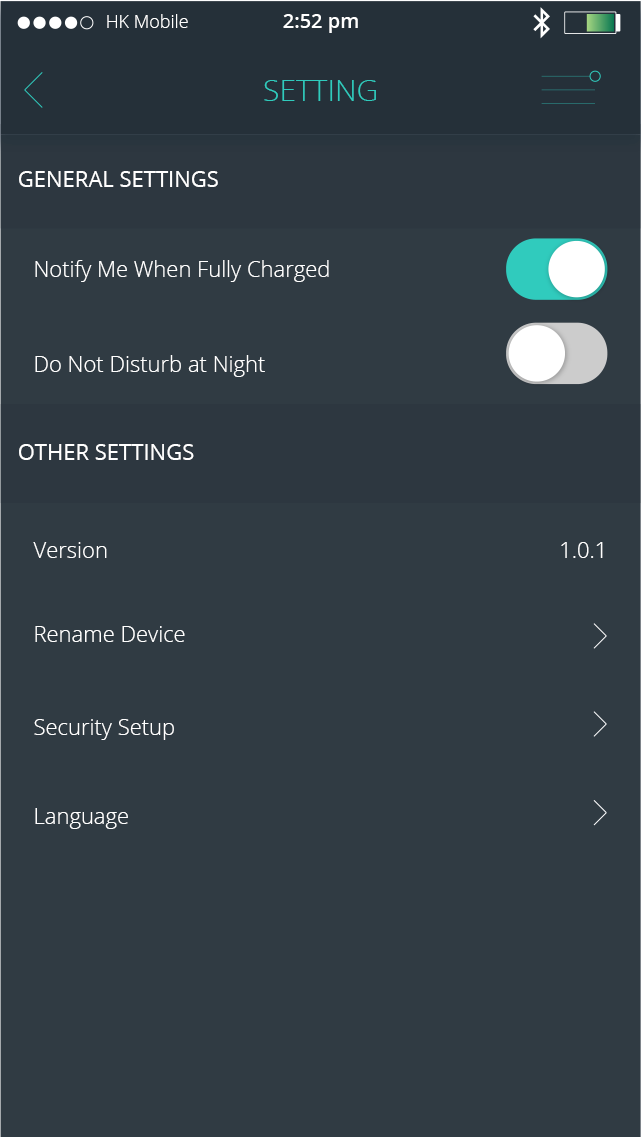
<style>
.page{position:relative;width:641px;height:1137px;background:#303b43}
.page>*{position:absolute;margin:0}
.t1{font:18px "OpenSans-Light";color:#ffffff}
.t2{font:20px "OpenSans-Semibold";color:#ffffff}
.t3{font:30px "OpenSans-Light";color:#30cbbd}
.t4{font:22px "OpenSans";color:#ffffff}
.t5{font:22px "OpenSans-Light";color:#ffffff}
</style>
<div class="page">
<p class="t1" style="left:107px;top:14px;width:81px;height:14px">HK Mobile</p>
<p class="t2" style="left:283px;top:14px;width:75px;height:19px">2:52 pm</p>
<p class="t3" style="left:264px;top:80px;width:112px;height:21px">SETTING</p>
<p class="t4" style="left:19px;top:171px;width:199px;height:16px">GENERAL SETTINGS</p>
<p class="t5" style="left:35px;top:260px;width:294px;height:22px">Notify Me When Fully Charged</p>
<p class="t5" style="left:35px;top:355px;width:230px;height:22px">Do Not Disturb at Night</p>
<p class="t4" style="left:19px;top:444px;width:175px;height:16px">OTHER SETTINGS</p>
<p class="t5" style="left:33px;top:542px;width:74px;height:16px">Version</p>
<p class="t5" style="left:561px;top:542px;width:42px;height:16px">1.0.1</p>
<p class="t5" style="left:35px;top:626px;width:150px;height:16px">Rename Device</p>
<p class="t5" style="left:34px;top:719px;width:140px;height:21px">Security Setup</p>
<p class="t5" style="left:35px;top:808px;width:93px;height:21px">Language</p>
</div>
